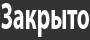
<style>
.page{position:relative;width:90px;height:40px;background:#333333}
.page>*{position:absolute;margin:0}
.t1{font:38px "MyriadPro-Bold";color:#ffffff;scale:0.59 1}
</style>
<div class="page">
<p class="t1" style="left:1px;top:3px;width:88px;height:34px">Закрыто</p>
</div>
